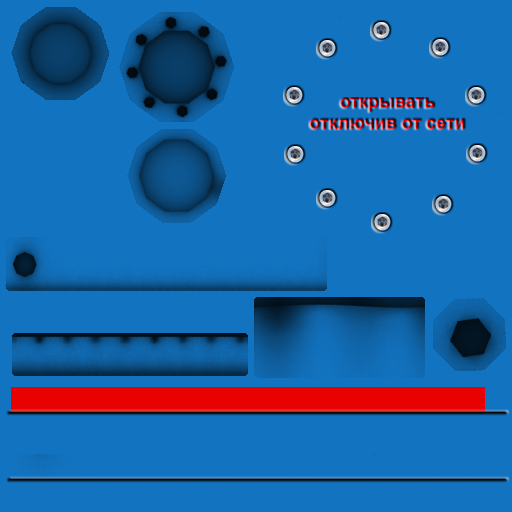
<style>
.page{position:relative;width:512px;height:512px;background:#1273c0}
.page>*{position:absolute;margin:0}
.t1{font:18px "Arial-BoldMT"}
</style>
<div class="page">
<p class="t1" style="left:309px;top:98px;width:156px;height:31px;text-align:center">открывать <br>отключив от сети</p>
</div>
